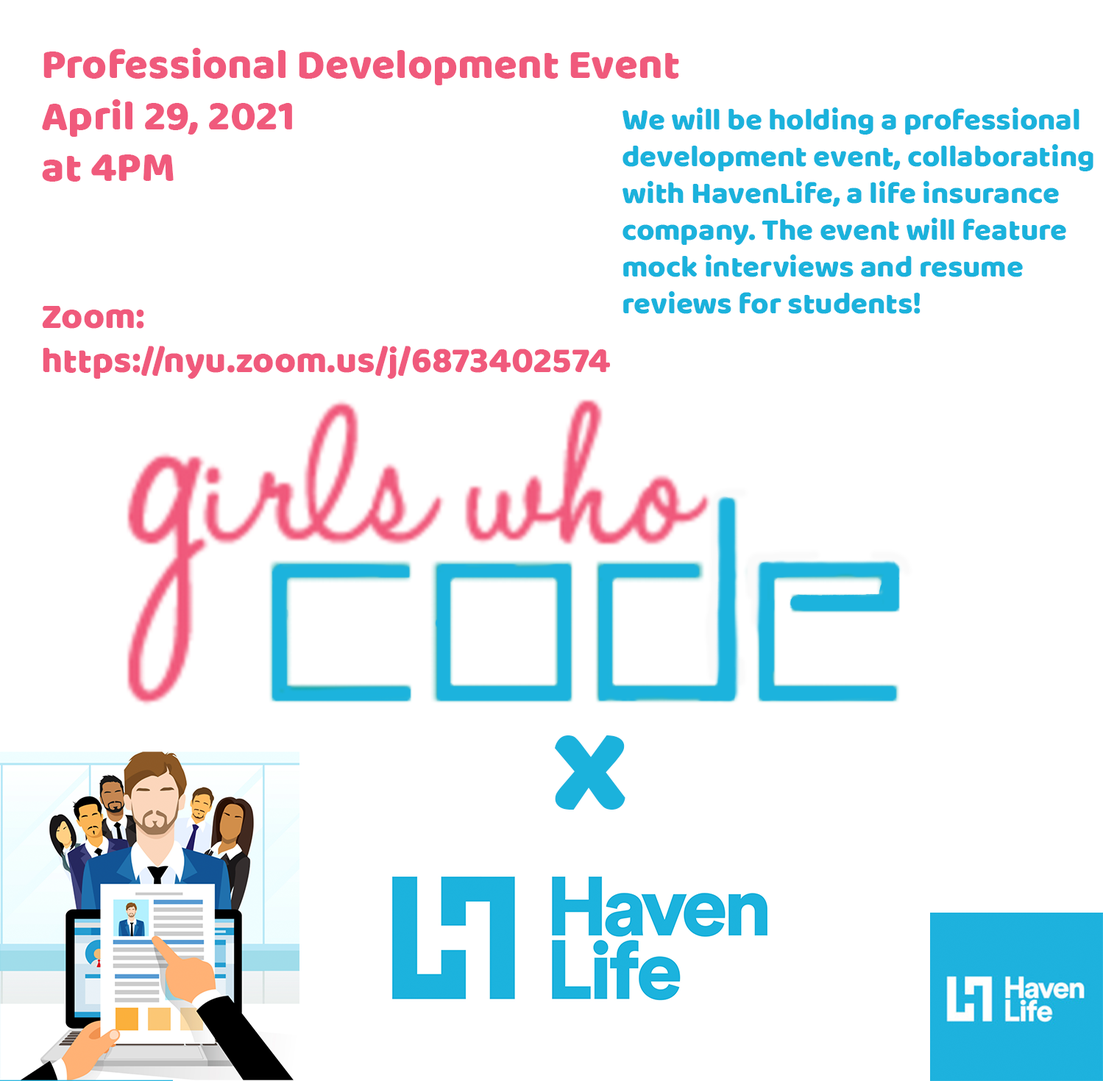
<style>
.page{position:relative;width:1103px;height:1081px;background:#ffffff}
.page>*{position:absolute;margin:0}
.t1{font:42.9px "BalooThambi-Regular";color:#f05a7c}
.t2{font:36.8px "BalooThambi-Regular";color:#f05a7c}
.t3{font:30.7px "BalooThambi-Regular";color:#1bb2dc}
.t4{font:147.1px "BalooThambi-Regular";color:#1bb2dc}
</style>
<div class="page">
<p class="t1" style="left:42px;top:48px;width:637px;height:331px">Professional Development Event<br>April 29, 2021<br>at 4PM<br><br><br><span class="t2">Zoom: <br>https://nyu.zoom.us/j/6873402574</span></p>
<p class="t3" style="left:622px;top:107px;width:471px;height:207px">We will be holding a professional development event, collaborating with HavenLife, a life insurance company. The event will feature mock interviews and resume reviews for students!</p>
<p class="t4" style="left:555px;top:736px;width:70px;height:74px">x</p>
</div>
